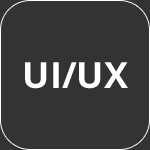
<style>
.page{position:relative;width:150px;height:150px;background:#333333}
.page>*{position:absolute;margin:0}
.t1{font:36px "OpenSans-Bold";color:#ffffff}
</style>
<div class="page">
<p class="t1" style="left:25px;top:62px;width:103px;height:27px">UI/UX</p>
</div>
